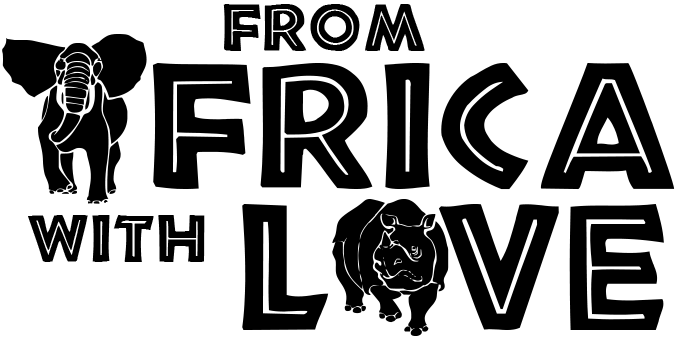
<style>
.page{position:relative;width:681px;height:345px;background:#ffffff}
.page>*{position:absolute;margin:0}
.t1{font:62px "African";color:#000000}
.t2{font:165.2px "WWSafari";color:#000000;scale:1.33 1}
.t3{font:165.2px "African";color:#000000}
.t4{font:137.7px "WWSafari";color:#000000}
</style>
<div class="page">
<p class="t1" style="left:223px;top:4px;width:202px;height:47px">From</p>
<p class="t2" style="left:2px;top:34px;width:145px;height:170px">f</p>
<p class="t3" style="left:152px;top:63px;width:523px;height:127px">frica</p>
<p class="t3" style="left:242px;top:204px;width:422px;height:126px">L ve</p>
<p class="t4" style="left:332px;top:199px;width:117px;height:137px">n</p>
<p class="t1" style="left:28px;top:215px;width:177px;height:47px">with</p>
</div>
